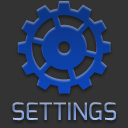
<style>
.page{position:relative;width:128px;height:128px;background:#333333}
.page>*{position:absolute;margin:0}
.t1{font:24px "Exo-Medium";text-transform:uppercase}
</style>
<div class="page">
<p class="t1" style="left:12px;top:102px;width:104px;height:19px">Settings</p>
</div>
